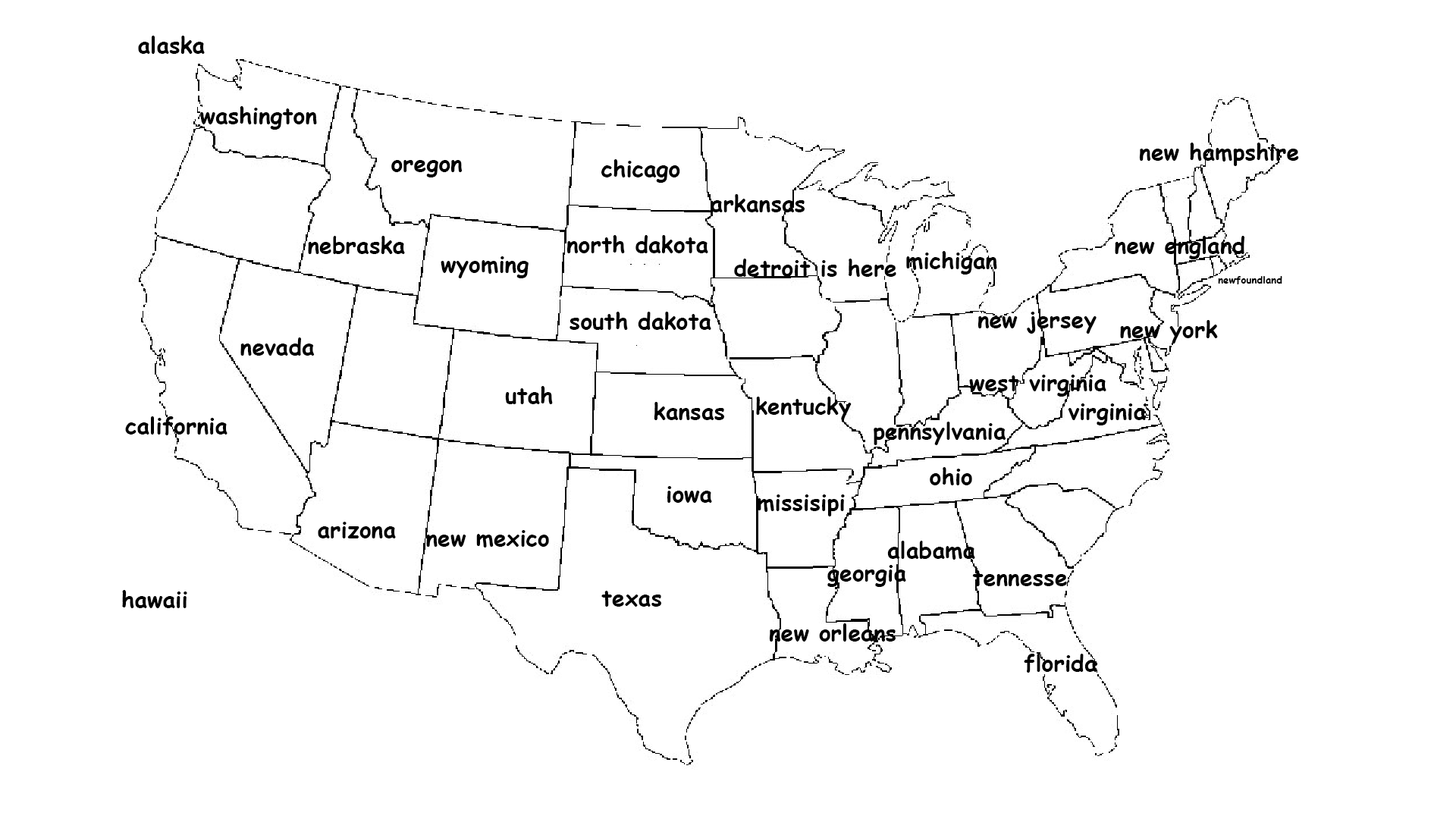
<style>
.page{position:relative;width:1456px;height:819px;background:#ffffff}
.page>*{position:absolute;margin:0}
.t1{font:22.7px "ComicSansMS-Bold";color:#000000}
.t2{font:10.1px "ComicSansMS-Bold";color:#000000}
</style>
<div class="page">
<p class="t1" style="left:138px;top:36px;width:67px;height:18px">alaska</p>
<p class="t1" style="left:200px;top:106px;width:117px;height:24px">washington</p>
<p class="t1" style="left:1139px;top:143px;width:160px;height:23px">new hampshire</p>
<p class="t1" style="left:391px;top:160px;width:71px;height:17px">oregon</p>
<p class="t1" style="left:601px;top:159px;width:79px;height:24px">chicago</p>
<p class="t1" style="left:711px;top:194px;width:94px;height:18px">arkansas</p>
<p class="t1" style="left:308px;top:236px;width:97px;height:18px">nebraska</p>
<p class="t1" style="left:566px;top:235px;width:142px;height:18px">north dakota</p>
<p class="t1" style="left:1115px;top:236px;width:129px;height:23px">new england</p>
<p class="t1" style="left:441px;top:256px;width:88px;height:22px">wyoming</p>
<p class="t1" style="left:906px;top:251px;width:91px;height:24px">michigan</p>
<p class="t1" style="left:734px;top:259px;width:162px;height:18px">detroit is here</p>
<p class="t2" style="left:1218px;top:276px;width:64px;height:8px">newfoundland</p>
<p class="t1" style="left:570px;top:312px;width:141px;height:18px">south dakota</p>
<p class="t1" style="left:977px;top:312px;width:120px;height:22px">new jersey</p>
<p class="t1" style="left:1120px;top:320px;width:98px;height:24px">new york</p>
<p class="t1" style="left:240px;top:337px;width:75px;height:19px">nevada</p>
<p class="t1" style="left:969px;top:375px;width:137px;height:22px">west virginia</p>
<p class="t1" style="left:505px;top:386px;width:48px;height:18px">utah</p>
<p class="t1" style="left:654px;top:402px;width:70px;height:18px">kansas</p>
<p class="t1" style="left:756px;top:397px;width:96px;height:23px">kentucky</p>
<p class="t1" style="left:1068px;top:403px;width:78px;height:22px">virginia</p>
<p class="t1" style="left:125px;top:416px;width:102px;height:19px">california</p>
<p class="t1" style="left:874px;top:422px;width:132px;height:23px">pennsylvania</p>
<p class="t1" style="left:930px;top:467px;width:42px;height:18px">ohio</p>
<p class="t1" style="left:667px;top:486px;width:45px;height:17px">iowa</p>
<p class="t1" style="left:758px;top:494px;width:87px;height:22px">missisipi</p>
<p class="t1" style="left:318px;top:522px;width:78px;height:16px">arizona</p>
<p class="t1" style="left:426px;top:530px;width:123px;height:18px">new mexico</p>
<p class="t1" style="left:887px;top:541px;width:88px;height:19px">alabama</p>
<p class="t1" style="left:827px;top:565px;width:79px;height:22px">georgia</p>
<p class="t1" style="left:972px;top:570px;width:95px;height:16px">tennesse</p>
<p class="t1" style="left:122px;top:590px;width:65px;height:18px">hawaii</p>
<p class="t1" style="left:601px;top:591px;width:60px;height:16px">texas</p>
<p class="t1" style="left:769px;top:623px;width:127px;height:19px">new orleans</p>
<p class="t1" style="left:1024px;top:654px;width:73px;height:19px">florida</p>
</div>
